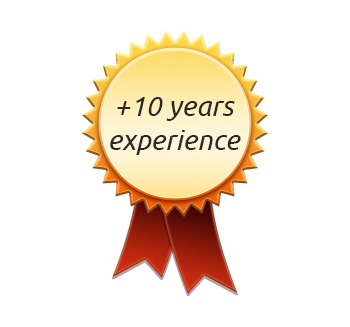
<style>
.page{position:relative;width:350px;height:327px;background:#ffffff}
.page>*{position:absolute;margin:0}
.t1{font:28px "Ubuntu-Italic";color:#282828}
</style>
<div class="page">
<p class="t1" style="left:110px;top:97px;width:131px;height:58px;text-align:center">+10 years experience</p>
</div>
